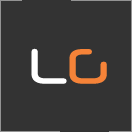
<style>
.page{position:relative;width:132px;height:132px;background:#333333}
.page>*{position:absolute;margin:0}
.t1{font:48px "NeuropolXRg-Regular";letter-spacing:-0.06em;color:#ffffff;font-weight:bold;scale:0.92 1}
.t2{font:48px "NeuropolXRg-Regular";letter-spacing:-0.06em;color:#f68338;font-weight:bold;scale:0.92 1}
</style>
<div class="page">
<p class="t1" style="left:31px;top:48px;width:76px;height:36px">L<span class="t2">G</span></p>
</div>
